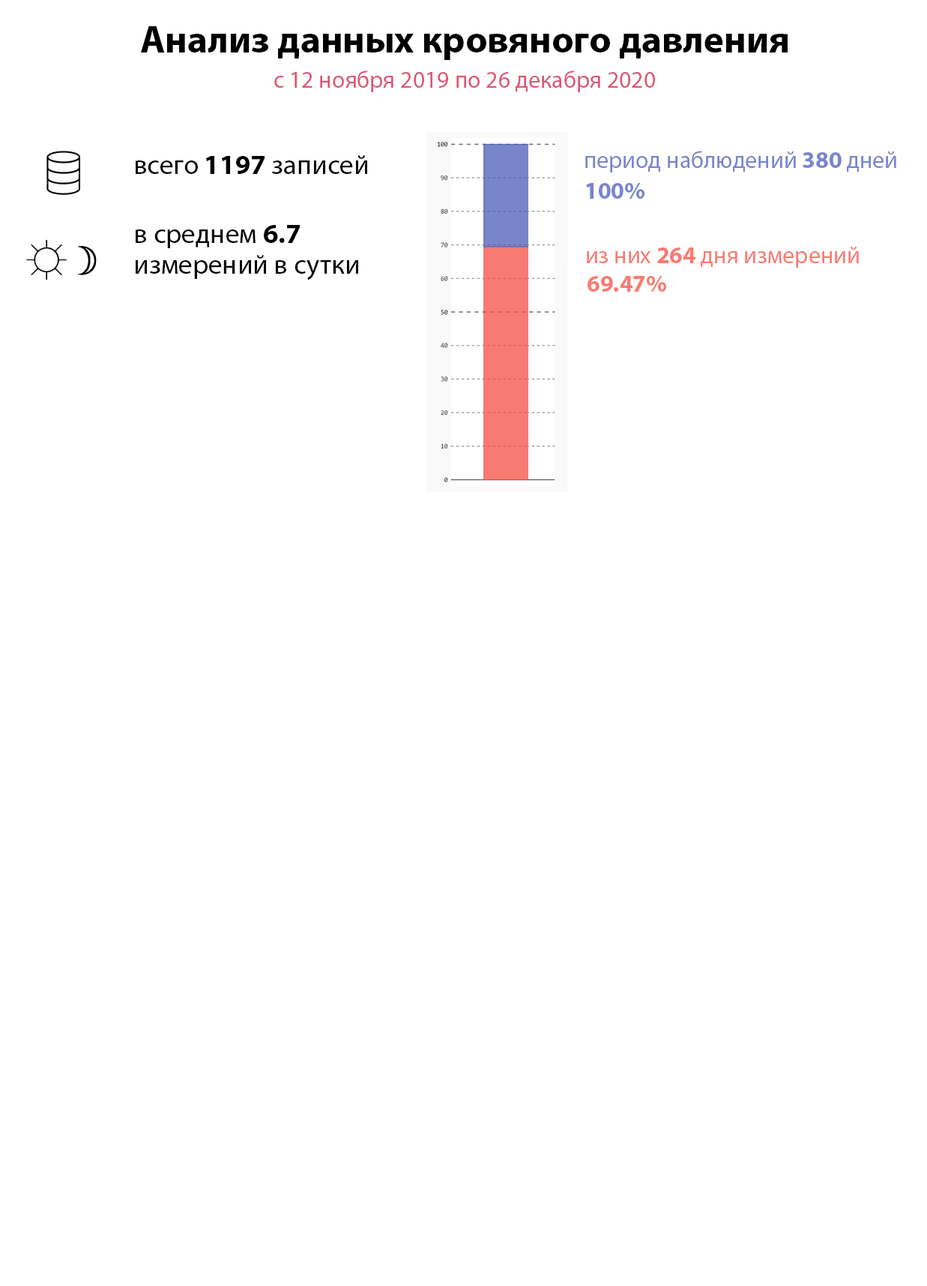
<style>
.page{position:relative;width:927px;height:1286px;background:#ffffff}
.page>*{position:absolute;margin:0}
.t1{font:38.2px "MyriadPro-Bold";color:#000000}
.t2{font:24px "MyriadPro-Regular";color:#dc5678}
.t3{font:27.7px "MyriadPro-Regular";color:#000000}
.t4{font:27.7px "MyriadPro-Bold";color:#000000}
.t5{font:24px "MyriadPro-Regular";color:#7885cb}
.t6{font:24px "MyriadPro-Bold";color:#7885cb}
.t7{font:27.7px/30.7px "MyriadPro-Regular";color:#000000}
.t8{font:27.7px/30.7px "MyriadPro-Bold";color:#000000}
.t9{font:24px "MyriadPro-Regular";color:#f77b72}
.t10{font:24px "MyriadPro-Bold";color:#f77b72}
</style>
<div class="page">
<p class="t1" style="left:141px;top:26px;width:647px;height:34px">Анализ данных кровяного давления</p>
<p class="t2" style="left:274px;top:70px;width:381px;height:22px">с 12 ноября 2019 по 26 декабря 2020</p>
<p class="t3" style="left:136px;top:155px;width:231px;height:19px">всего<span class="t4"> 1197</span> записей</p>
<p class="t5" style="left:586px;top:151px;width:311px;height:21px">период наблюдений <span class="t6">380 </span>дней</p>
<p class="t6" style="left:586px;top:183px;width:59px;height:16px">100%</p>
<p class="t7" style="left:136px;top:225px;width:222px;height:55px">в среднем <span class="t8">6.7</span> <br>измерений в сутки</p>
<p class="t9" style="left:587px;top:247px;width:272px;height:21px">из них<span class="t10"> 264 </span>дня измерений</p>
<p class="t10" style="left:588px;top:276px;width:79px;height:16px">69.47%</p>
</div>
